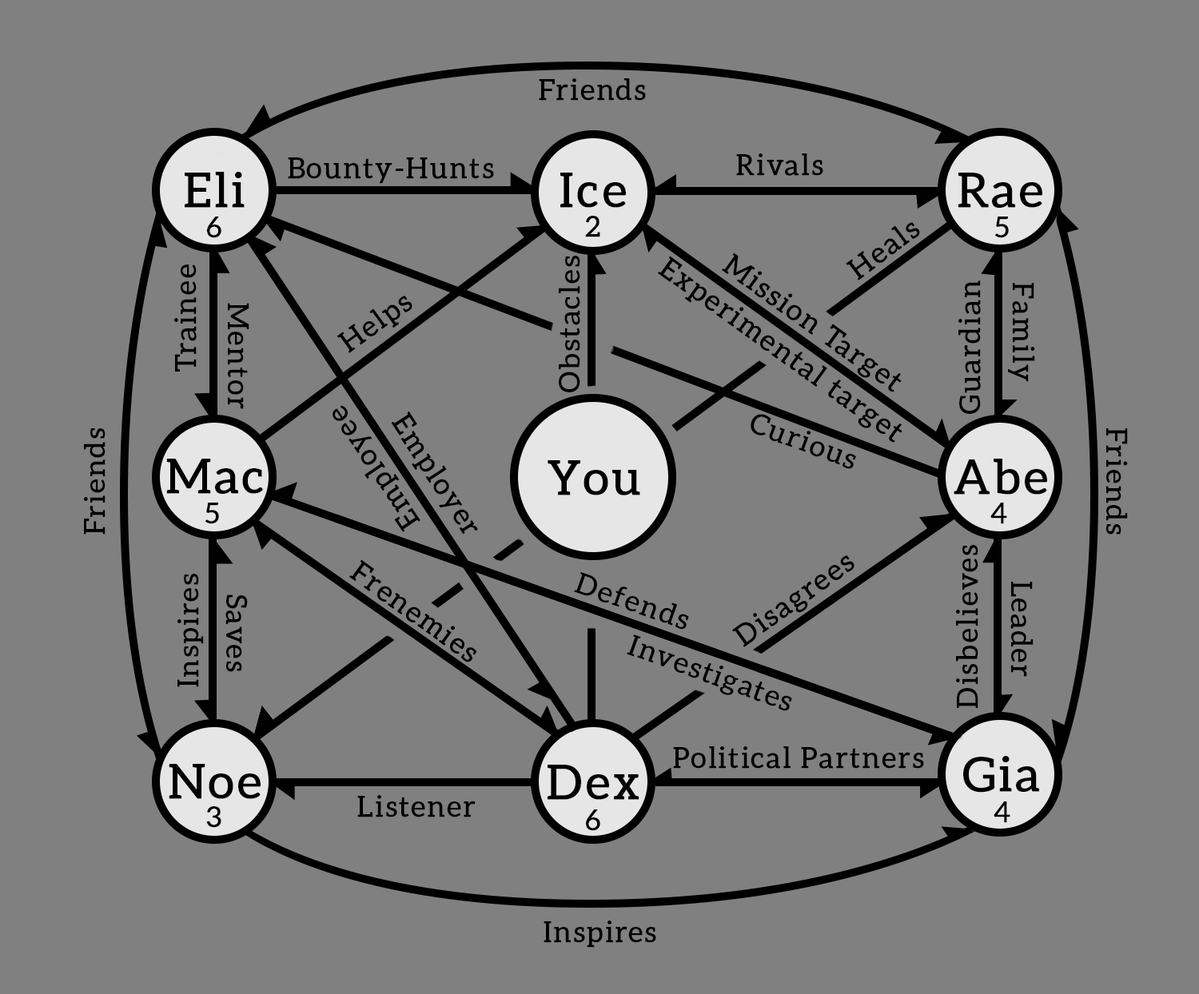
<style>
.page{position:relative;width:1199px;height:994px;background:#808080}
.page>*{position:absolute;margin:0}
.t1{font:28.8px "Aleo-Regular";letter-spacing:0.05em;color:#000000;font-weight:bold}
.t2{font:28.4px "Aleo-Regular";letter-spacing:0.05em;color:#000000;font-weight:bold}
</style>
<div class="page">
<p class="t1" style="left:539px;top:78px;width:107px;height:23px">Friends</p>
<p class="t1" style="left:288px;top:157px;width:206px;height:27px">Bounty-Hunts</p>
<p class="t1" style="left:736px;top:153px;width:87px;height:23px">Rivals</p>
<p class="t1" style="left:207px;top:217px;width:14px;height:21px">6</p>
<p class="t1" style="left:585px;top:216px;width:15px;height:21px">2</p>
<p class="t1" style="left:994px;top:217px;width:15px;height:21px">5</p>
<p class="t1" style="left:846px;top:222px;width:74px;height:59px;rotate:-37deg">Heals</p>
<p class="t2" style="left:559px;top:256px;width:21px;height:137px;rotate:-90deg">Obstacles</p>
<p class="t1" style="left:658px;top:256px;width:245px;height:187px;rotate:36deg">Experimental target</p>
<p class="t1" style="left:722px;top:253px;width:180px;height:140px;rotate:36deg">Mission Target</p>
<p class="t1" style="left:174px;top:265px;width:23px;height:107px;rotate:-90deg">Trainee</p>
<p class="t1" style="left:958px;top:281px;width:23px;height:133px;rotate:-90deg">Guardian</p>
<p class="t1" style="left:1008px;top:283px;width:27px;height:99px;rotate:90deg">Family</p>
<p class="t1" style="left:228px;top:303px;width:21px;height:106px;rotate:90deg">Mentor</p>
<p class="t1" style="left:337px;top:296px;width:75px;height:57px;rotate:-36deg">Helps</p>
<p class="t1" style="left:333px;top:405px;width:87px;height:127px;rotate:-124deg">Employee</p>
<p class="t1" style="left:391px;top:412px;width:87px;height:123px;rotate:57deg">Employer</p>
<p class="t1" style="left:751px;top:414px;width:105px;height:55px;rotate:21deg">Curious</p>
<p class="t2" style="left:84px;top:428px;width:22px;height:107px;rotate:-90deg">Friends</p>
<p class="t2" style="left:1106px;top:428px;width:22px;height:107px;rotate:90deg">Friends</p>
<p class="t1" style="left:205px;top:503px;width:14px;height:21px">5</p>
<p class="t1" style="left:990px;top:503px;width:17px;height:21px">4</p>
<p class="t1" style="left:956px;top:545px;width:22px;height:163px;rotate:-90deg">Disbelieves</p>
<p class="t1" style="left:732px;top:556px;width:123px;height:92px;rotate:-36deg">Disagrees</p>
<p class="t1" style="left:349px;top:560px;width:128px;height:103px;rotate:36deg">Frenemies</p>
<p class="t2" style="left:177px;top:574px;width:27px;height:113px;rotate:-90deg">Inspires</p>
<p class="t1" style="left:574px;top:572px;width:115px;height:58px;rotate:19deg">Defends</p>
<p class="t1" style="left:1010px;top:582px;width:24px;height:95px;rotate:90deg">Leader</p>
<p class="t1" style="left:225px;top:595px;width:23px;height:77px;rotate:90deg">Saves</p>
<p class="t1" style="left:627px;top:635px;width:165px;height:76px;rotate:20deg">Investigates</p>
<p class="t1" style="left:673px;top:747px;width:251px;height:22px">Political Partners</p>
<p class="t1" style="left:357px;top:795px;width:119px;height:23px">Listener</p>
<p class="t1" style="left:206px;top:807px;width:15px;height:21px">3</p>
<p class="t1" style="left:586px;top:810px;width:14px;height:21px">6</p>
<p class="t1" style="left:994px;top:802px;width:16px;height:21px">4</p>
<p class="t1" style="left:544px;top:921px;width:112px;height:27px">Inspires</p>
</div>
